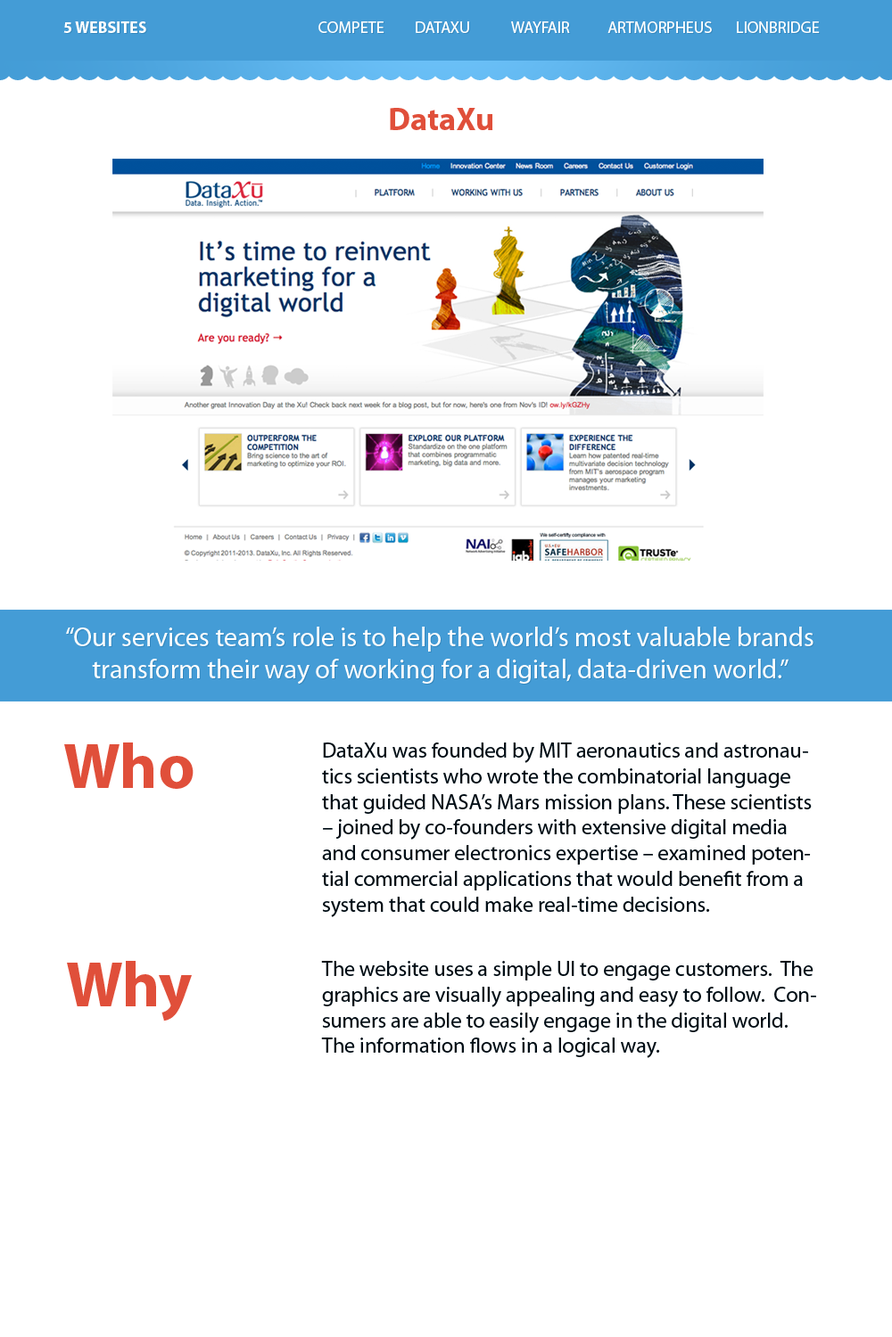
<style>
.page{position:relative;width:892px;height:1337px;background:#ffffff}
.page>*{position:absolute;margin:0}
.t1{font:16px "MyriadPro-Bold";color:#ffffff}
.t2{font:16px "MyriadPro-Regular";color:#ffffff}
.t3{font:32.1px "MyriadPro-Bold";color:#e04f3a}
.t4{font:26.7px "MyriadPro-Regular";color:#ffffff}
.t5{font:64.2px "MyriadPro-Bold";color:#e04f3a}
.t6{font:21.4px "MyriadPro-Regular";color:#000d15}
</style>
<div class="page">
<p class="t1" style="left:63px;top:21px;width:83px;height:12px">5 WEBSITES</p>
<p class="t2" style="left:318px;top:21px;width:501px;height:12px">COMPETE DATAXU  WAYFAIR  ARTMORPHEUS LIONBRIDGE</p>
<p class="t3" style="left:390px;top:108px;width:103px;height:22px">DataXu</p>
<p class="t4" style="left:66px;top:627px;width:747px;height:58px;text-align:center">“Our services team’s role is to help the world’s most valuable brands transform their way of working for a digital, data-driven world.”</p>
<p class="t5" style="left:64px;top:743px;width:129px;height:46px">Who</p>
<p class="t6" style="left:322px;top:743px;width:489px;height:174px">DataXu was founded by MIT aeronautics and astronautics scientists who wrote the combinatorial language that guided NASA’s Mars mission plans. These scientists – joined by co-founders with extensive digital media and consumer electronics expertise – examined potential commercial applications that would benefit from a system that could make real-time decisions.</p>
<p class="t5" style="left:67px;top:961px;width:125px;height:61px">Why</p>
<p class="t6" style="left:321px;top:961px;width:495px;height:97px">The website uses a simple UI to engage customers.  The graphics are visually appealing and easy to follow.  Consumers are able to easily engage in the digital world.  The information flows in a logical way.</p>
</div>
